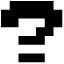
<style>
.page{position:relative;width:64px;height:64px;background:#ffffff}
.page>*{position:absolute;margin:0}
.t1{font:70px "PressStart2P-Regular";color:#000000}
</style>
<div class="page">
<p class="t1" style="left:1px;top:1px;width:62px;height:62px">?</p>
</div>
